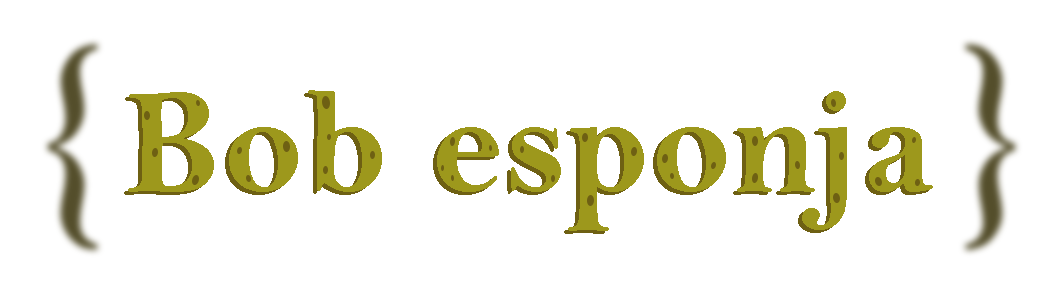
<style>
.page{position:relative;width:1052px;height:292px;background:#ffffff}
.page>*{position:absolute;margin:0}
.t1{font:150px "BellMTBold";letter-spacing:0.01em}
.t2{font:150px "BellMTBold";letter-spacing:0.01em;color:#9d981c}
</style>
<div class="page">
<p class="t1" style="left:124px;top:93px;width:805px;height:141px">Bob esponja</p>
<p class="t2" style="left:128px;top:90px;width:805px;height:141px">Bob esponja</p>
</div>
